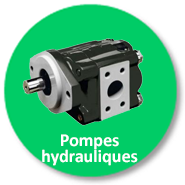
<style>
.page{position:relative;width:185px;height:185px;background:#00cc66}
.page>*{position:absolute;margin:0}
.t1{font:18px/16px "Calibri-Bold";color:#ffffff}
</style>
<div class="page">
<p class="t1" style="left:42px;top:134px;width:96px;height:32px;text-align:center">Pompes  <br>hydrauliques</p>
</div>
